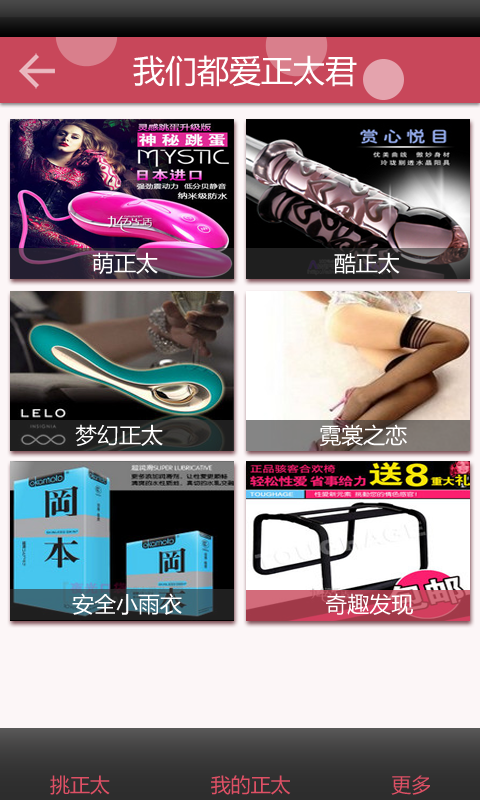
<style>
.page{position:relative;width:480px;height:800px}
.page>*{position:absolute;margin:0}
.t1{font:32px "MicrosoftYaHei";color:#ffffff}
.t2{font:22px "MicrosoftYaHei";color:#ffffff}
.t3{font:20px "MicrosoftYaHei";color:#de5065}
</style>
<div class="page">
<p class="t1" style="left:133px;top:55px;width:224px;height:32px">我们都爱正太君</p>
<p class="t2" style="left:92px;top:252px;width:308px;height:23px">萌正太                           酷正太</p>
<p class="t2" style="left:75px;top:424px;width:332px;height:22px">梦幻正太                        霓裳之恋</p>
<p class="t2" style="left:72px;top:593px;width:341px;height:22px">安全小雨衣                      奇趣发现</p>
<p class="t3" style="left:50px;top:775px;width:380px;height:20px">挑正太                 我的正太                 更多</p>
</div>
